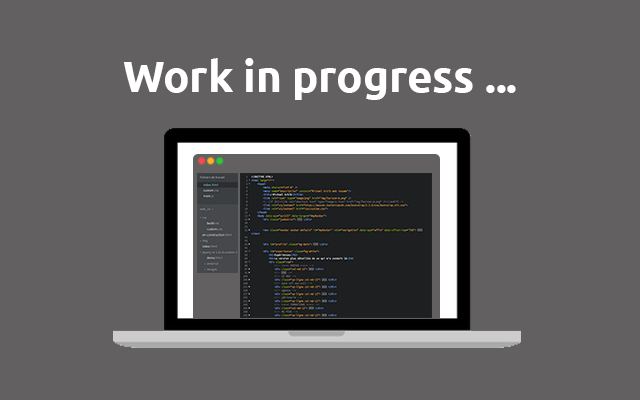
<style>
.page{position:relative;width:640px;height:400px;background:#636061}
.page>*{position:absolute;margin:0}
.t1{font:43.6px "Ubuntu-Bold";color:#ffffff}
</style>
<div class="page">
<p class="t1" style="left:123px;top:58px;width:393px;height:42px">Work in progress ...</p>
</div>
